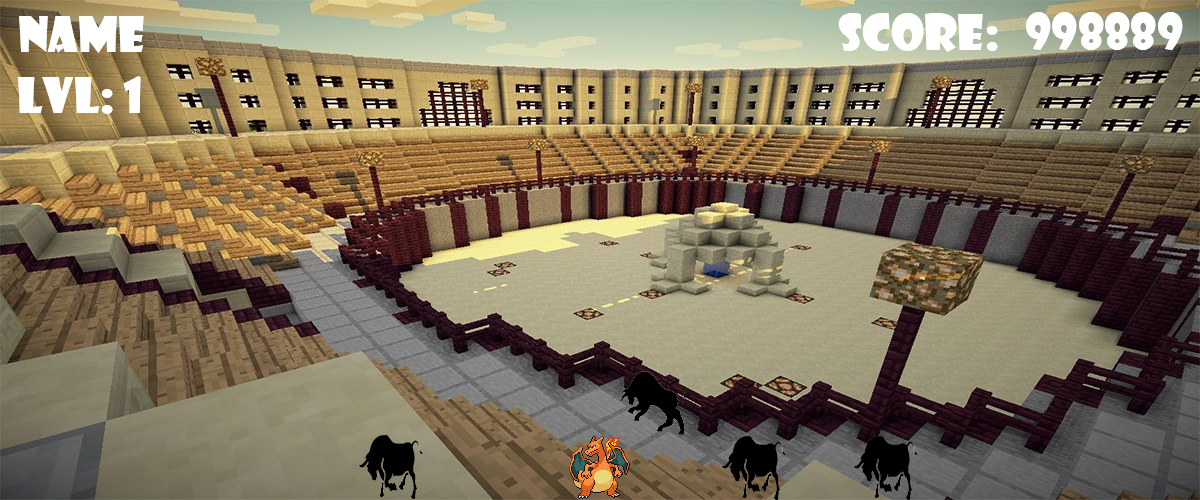
<style>
.page{position:relative;width:1200px;height:500px}
.page>*{position:absolute;margin:0}
.t1{font:48px "ShowcardGothic-Reg";color:#ffffff}
</style>
<div class="page">
<p class="t1" style="left:19px;top:16px;width:125px;height:37px">NAME</p>
<p class="t1" style="left:838px;top:13px;width:160px;height:39px">score:</p>
<p class="t1" style="left:1026px;top:12px;width:157px;height:38px">998889</p>
<p class="t1" style="left:18px;top:77px;width:95px;height:37px">LVL:</p>
<p class="t1" style="left:123px;top:76px;width:18px;height:37px">1</p>
</div>
